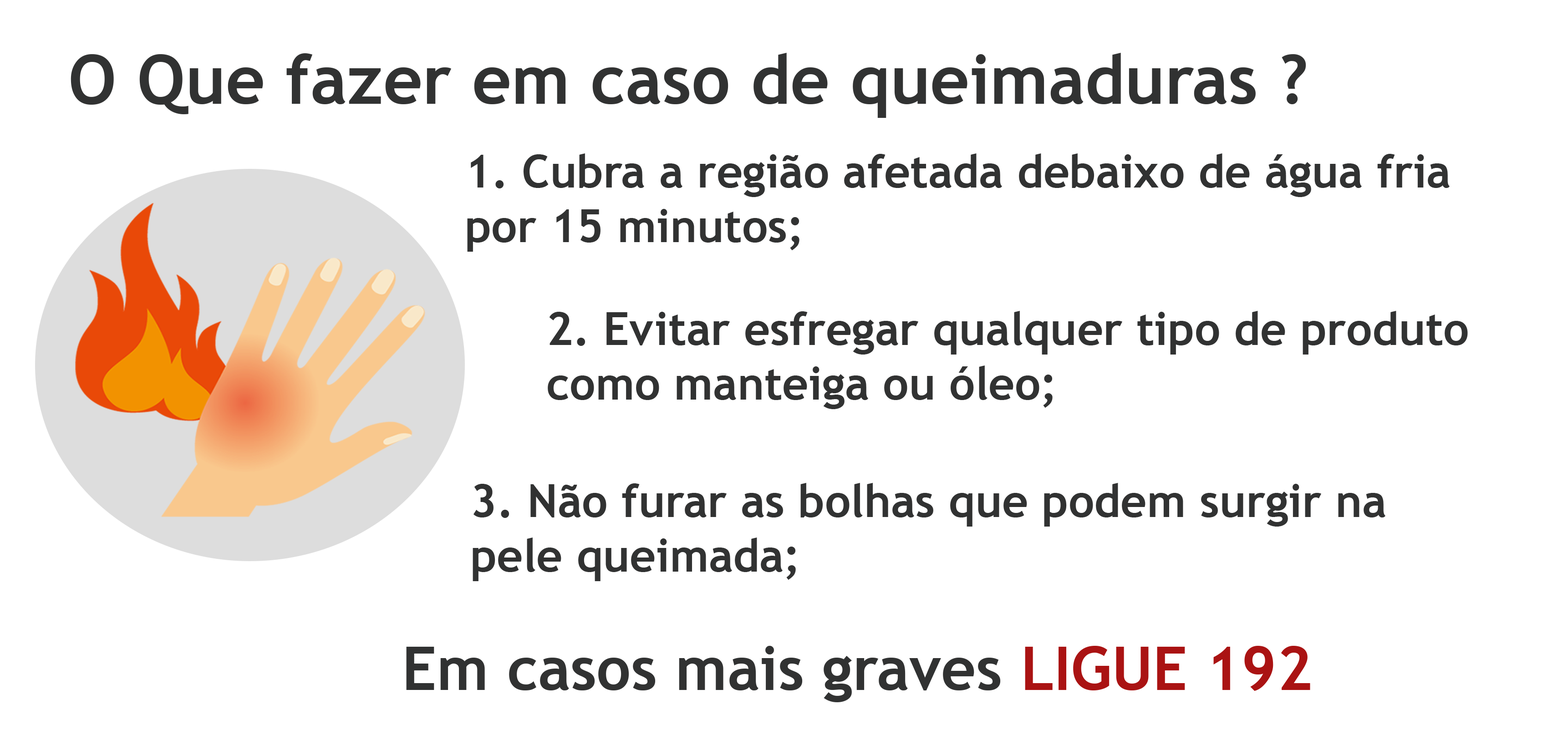
<style>
.page{position:relative;width:1568px;height:730px;background:#ffffff}
.page>*{position:absolute;margin:0}
.t1{font:68.3px "TrebuchetMS-Bold";color:#313232}
.t2{font:45.5px "TrebuchetMS-Bold";color:#313232}
.t3{font:60.7px "TrebuchetMS-Bold";color:#313232}
.t4{font:60.7px "TrebuchetMS-Bold";color:#aa1313}
</style>
<div class="page">
<p class="t1" style="left:71px;top:53px;width:1235px;height:65px">O Que fazer em caso de queimaduras ?</p>
<p class="t2" style="left:467px;top:153px;width:983px;height:99px">1. Cubra a região afetada debaixo de água fria<br>por 15 minutos;</p>
<p class="t2" style="left:548px;top:311px;width:920px;height:98px">2. Evitar esfregar qualquer tipo de produto<br>como manteiga ou óleo;</p>
<p class="t2" style="left:473px;top:483px;width:912px;height:98px">3. Não furar as bolhas que podem surgir na<br>pele queimada;</p>
<p class="t3" style="left:406px;top:646px;width:904px;height:57px">Em casos mais graves<span class="t4"> LIGUE 192</span></p>
</div>
